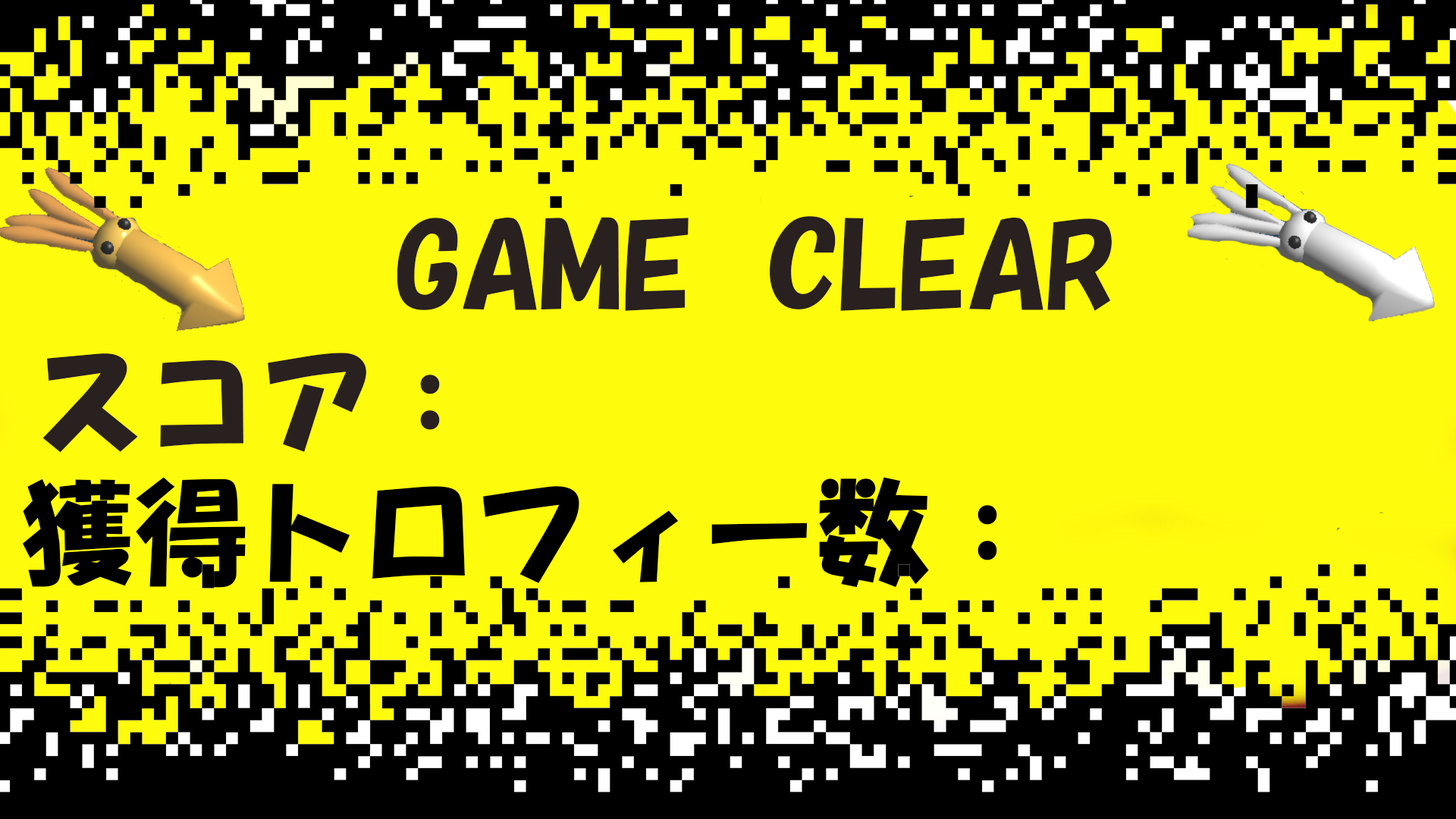
<style>
.page{position:relative;width:1456px;height:819px;background:#fffb0d}
.page>*{position:absolute;margin:0}
.t1{font:113.7px "HGSSoeiKakupoptai";color:#292020}
.t2{font:113.7px "HGSSoeiKakupoptai";color:#000000}
</style>
<div class="page">
<p class="t1" style="left:397px;top:216px;width:715px;height:95px">GAME  CLEAR</p>
<p class="t1" style="left:42px;top:353px;width:398px;height:100px">スコア：</p>
<p class="t2" style="left:22px;top:477px;width:975px;height:111px">獲得トロフィー数：</p>
</div>
